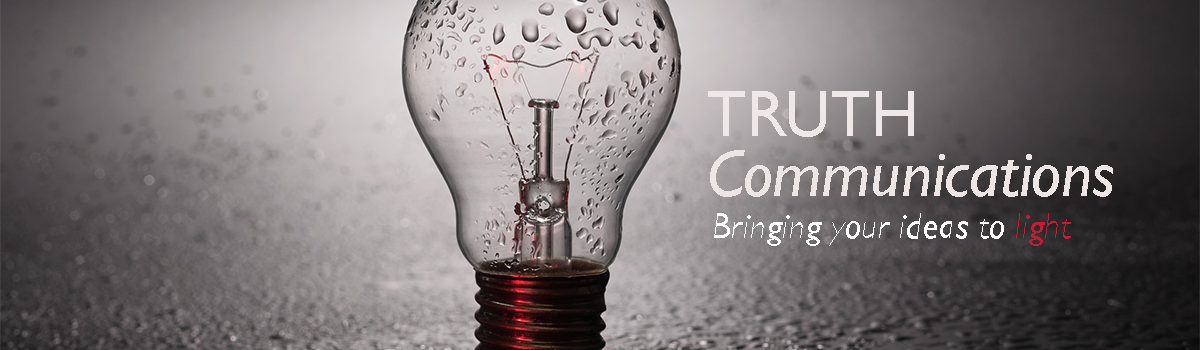
<style>
.page{position:relative;width:1200px;height:350px}
.page>*{position:absolute;margin:0}
.t1{font:66px/60px "GillSans-Italic";color:#eee5e5}
.t2{font:66px/60px "GillSans";color:#f0e8e8}
.t3{font:36px "GillSans-Italic";color:#ffffff}
.t4{font:36px "GillSans-Italic";color:#c71a34}
</style>
<div class="page">
<p class="t1" style="left:708px;top:91px;width:405px;height:106px"><span class="t2">TRUTH <br></span>Communications</p>
<p class="t3" style="left:714px;top:213px;width:357px;height:33px">Bringing your ideas to <span class="t4">light</span></p>
</div>
